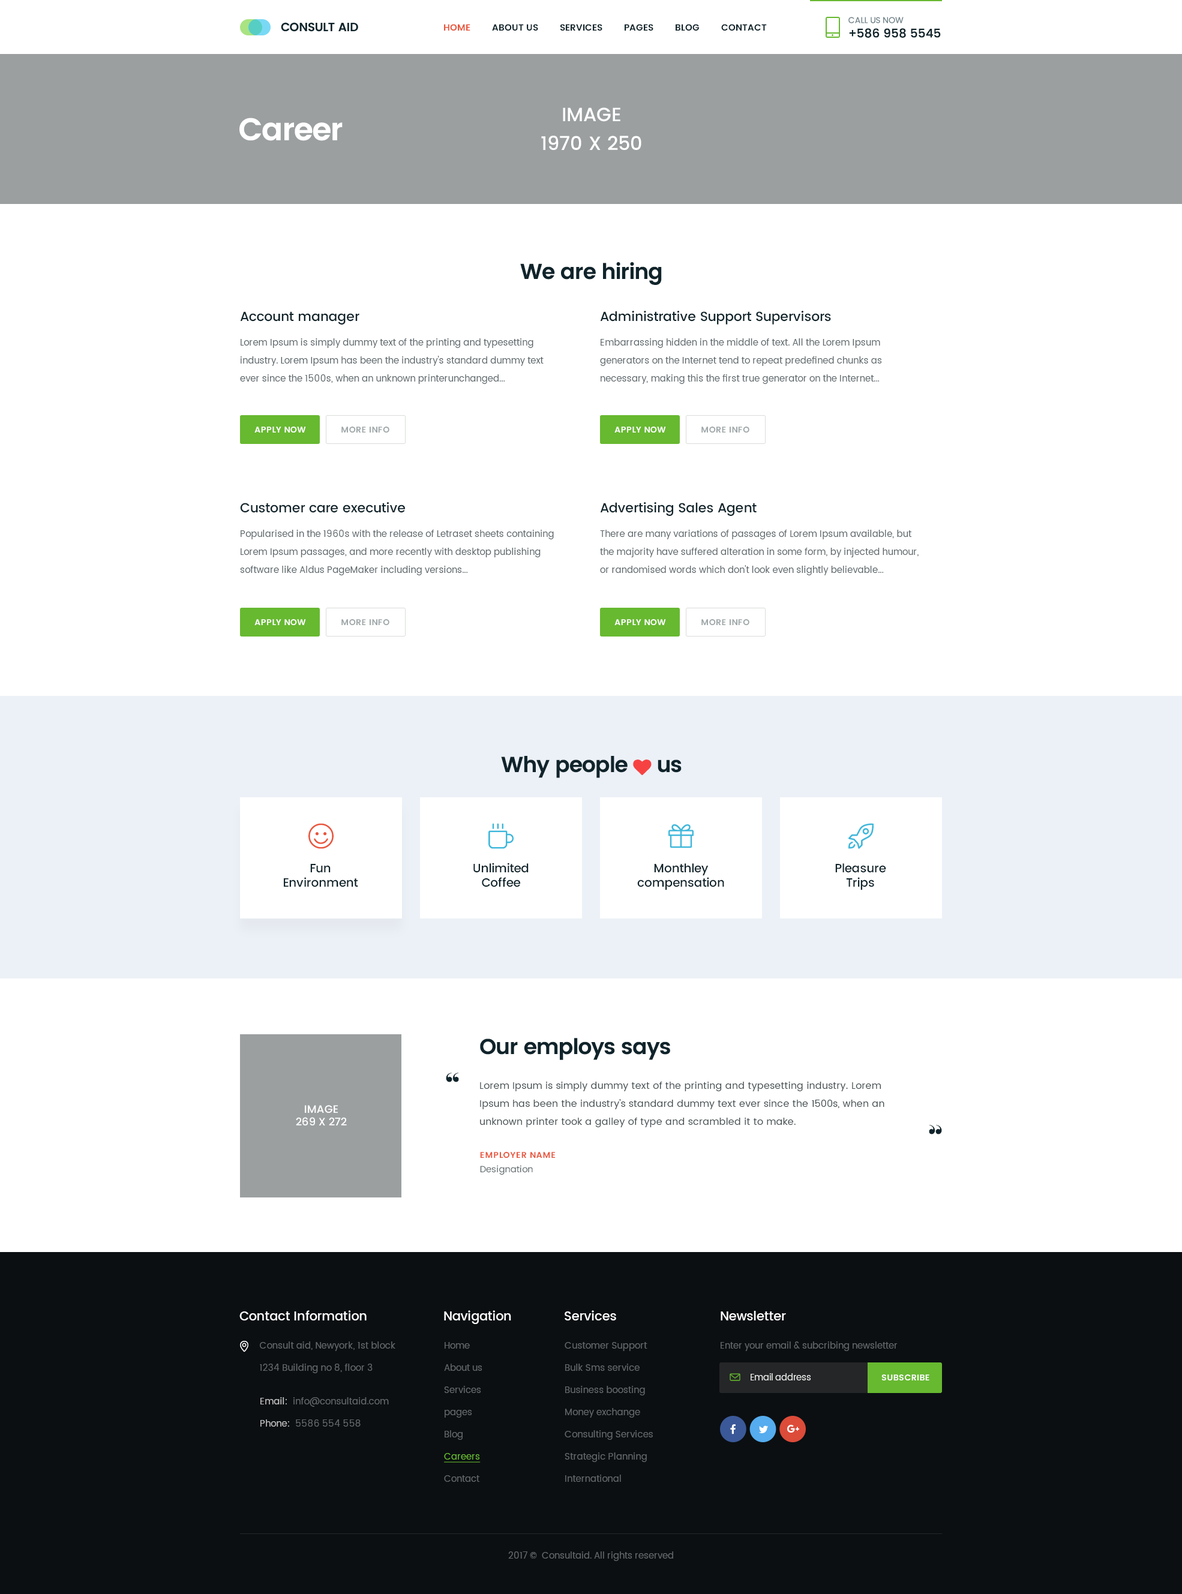
<style>
.page{position:relative;width:1182px;height:1594px;background:#ffffff}
.page>*{position:absolute;margin:0}
.t1{font:12px "Poppins-Medium";letter-spacing:-0.005em;color:#10242b;text-transform:uppercase}
.t2{font:8.4px "Poppins-Regular";letter-spacing:-0.005em;color:#718389;text-transform:uppercase}
.t3{font:9px "Poppins-SemiBold";color:#10242b;text-transform:uppercase}
.t4{font:9px "Poppins-SemiBold";color:#e9563d;text-transform:uppercase}
.t5{font:19.2px/28.8px "Poppins-Medium";color:#ffffff;text-transform:uppercase}
.t6{font:31.3px "Poppins-SemiBold";letter-spacing:-0.03em;color:#ffffff}
.t7{font:21.6px "Poppins-SemiBold";letter-spacing:-0.03em;color:#10242b}
.t8{font:13.2px "Poppins-Medium";letter-spacing:-0.01em;color:#10242b}
.t9{font:9px/18px "Poppins-Regular";letter-spacing:0.01em;color:#5c666a}
.t10{font:8.4px "Poppins-SemiBold";letter-spacing:0.025em;color:#ffffff;text-transform:uppercase}
.t11{font:8.4px "Poppins-SemiBold";letter-spacing:0.025em;color:#9fa7a9;text-transform:uppercase}
.t12{font:12px "Poppins-Medium";letter-spacing:-0.01em;color:#10242b}
.t13{font:30.2px "Elephant-Regular";letter-spacing:0.01em;color:#10242b}
.t14{font:9.6px/18px "Poppins-Regular";letter-spacing:0.01em;color:#465053}
.t15{font:10.8px "Poppins-Medium";color:#ffffff;text-transform:uppercase}
.t16{font:8.4px/14.4px "Poppins-SemiBold";letter-spacing:0.05em;color:#e9563d;text-transform:uppercase}
.t17{font:9px/14.4px "Poppins-Regular";letter-spacing:0.01em;color:#5c666a}
.t18{font:12.6px "Poppins-Medium";letter-spacing:-0.01em;color:#ffffff}
.t19{font:9px/22.2px "Poppins-Regular";letter-spacing:0.01em;color:#64676a}
.t20{font:9px/22.2px "Poppins-Regular";color:#64676a}
.t21{font:9px/22.2px "Poppins-Regular";color:#67b930;text-decoration:underline}
.t22{font:9px "Poppins-Regular";color:#64676a}
.t23{font:8.7px "Poppins-Regular";color:#ececec}
.t24{font:9px/22.2px "Poppins-Regular";letter-spacing:0.01em;color:#c5c5c5}
.t25{font:9px/22.2px "Poppins-Regular";letter-spacing:0.01em;color:#c4c4c4}
</style>
<div class="page">
<p class="t1" style="left:848px;top:17px;width:93px;height:21px"><span class="t2">Call us now<br></span>+586 958 5545</p>
<p class="t3" style="left:444px;top:24px;width:323px;height:7px"><span class="t4">Home</span>         about us         services         Pages         blog         contact</p>
<p class="t5" style="left:541px;top:107px;width:100px;height:43px;text-align:center">Image<br>1970 x 250</p>
<p class="t6" style="left:239px;top:118px;width:104px;height:23px">Career</p>
<p class="t7" style="left:520px;top:262px;width:142px;height:23px">We are hiring</p>
<p class="t8" style="left:240px;top:311px;width:119px;height:14px">Account manager</p>
<p class="t8" style="left:600px;top:311px;width:231px;height:14px">Administrative Support Supervisors</p>
<p class="t9" style="left:240px;top:338px;width:304px;height:46px">Lorem Ipsum is simply dummy text of the printing and typesetting industry. Lorem Ipsum has been the industry's standard dummy text ever since the 1500s, when an unknown printerunchanged...</p>
<p class="t9" style="left:600px;top:338px;width:282px;height:46px">Embarrassing hidden in the middle of text. All the Lorem Ipsum generators on the Internet tend to repeat predefined chunks as necessary, making this the first true generator on the Internet...</p>
<p class="t10" style="left:254px;top:427px;width:52px;height:6px">Apply now</p>
<p class="t11" style="left:341px;top:427px;width:48px;height:6px">more info</p>
<p class="t10" style="left:614px;top:427px;width:52px;height:6px">Apply now</p>
<p class="t11" style="left:701px;top:427px;width:48px;height:6px">more info</p>
<p class="t8" style="left:240px;top:502px;width:165px;height:11px">Customer care executive</p>
<p class="t8" style="left:600px;top:502px;width:157px;height:14px">Advertising Sales Agent</p>
<p class="t9" style="left:240px;top:530px;width:314px;height:45px">Popularised in the 1960s with the release of Letraset sheets containing Lorem Ipsum passages, and more recently with desktop publishing software like Aldus PageMaker including versions...<br> of Lorem Ipsum</p>
<p class="t9" style="left:600px;top:530px;width:319px;height:45px">There are many variations of passages of Lorem Ipsum available, but the majority have suffered alteration in some form, by injected humour, or randomised words which don't look even slightly believable...</p>
<p class="t10" style="left:254px;top:619px;width:52px;height:6px">Apply now</p>
<p class="t11" style="left:341px;top:619px;width:48px;height:6px">more info</p>
<p class="t10" style="left:614px;top:619px;width:52px;height:6px">Apply now</p>
<p class="t11" style="left:701px;top:619px;width:48px;height:6px">more info</p>
<p class="t12" style="left:284px;top:864px;width:74px;height:23px;text-align:center">Fun<br>Environment</p>
<p class="t12" style="left:473px;top:863px;width:56px;height:24px;text-align:center">Unlimited<br>Coffee</p>
<p class="t12" style="left:637px;top:863px;width:87px;height:27px;text-align:center">Monthley<br>compensation</p>
<p class="t12" style="left:835px;top:863px;width:51px;height:27px;text-align:center">Pleasure<br>Trips</p>
<p class="t7" style="left:480px;top:1038px;width:190px;height:22px">Our employs says</p>
<p class="t13" style="left:446px;top:1073px;width:13px;height:9px">“</p>
<p class="t14" style="left:480px;top:1082px;width:404px;height:45px">Lorem Ipsum is simply dummy text of the printing and typesetting industry. Lorem Ipsum has been the industry's standard dummy text ever since the 1500s, when an unknown printer took a galley of type and scrambled it to make.<br> a type specimen book.</p>
<p class="t15" style="left:296px;top:1105px;width:51px;height:21px;text-align:center">Image<br>269 x 272</p>
<p class="t13" style="left:929px;top:1125px;width:13px;height:10px;rotate:180deg">“</p>
<p class="t16" style="left:480px;top:1152px;width:75px;height:23px">Employer Name<br><span class="t17">Designation</span></p>
<p class="t18" style="left:239px;top:1310px;width:128px;height:11px">Contact Information</p>
<p class="t18" style="left:444px;top:1310px;width:67px;height:14px">Navigation</p>
<p class="t18" style="left:565px;top:1310px;width:51px;height:11px">Services</p>
<p class="t18" style="left:721px;top:1311px;width:65px;height:10px">Newsletter</p>
<p class="t19" style="left:260px;top:1342px;width:135px;height:31px">Consult aid, Newyork, 1st block <br>1234 Building no 8, floor 3</p>
<p class="t20" style="left:444px;top:1342px;width:38px;height:140px">Home<br>About us<br>Services<br>pages<br>Blog<br><span class="t21">Careers<br></span>Contact</p>
<p class="t19" style="left:565px;top:1342px;width:88px;height:140px">Customer Support<br>Bulk Sms service<br>Business boosting<br>Money exchange<br>Consulting Services<br>Strategic Planning<br>International</p>
<p class="t22" style="left:721px;top:1342px;width:177px;height:9px">Enter your email &amp; subcribing newsletter</p>
<p class="t23" style="left:751px;top:1373px;width:60px;height:8px">Email address</p>
<p class="t10" style="left:881px;top:1375px;width:48px;height:6px">Subscribe</p>
<p class="t19" style="left:260px;top:1397px;width:129px;height:30px"><span class="t24">Email:</span>  info@consultaid.com<br><span class="t25">Phone:</span>  5586 554 558</p>
<p class="t22" style="left:508px;top:1552px;width:165px;height:9px">2017 ©  Consultaid. All rights reserved</p>
</div>
